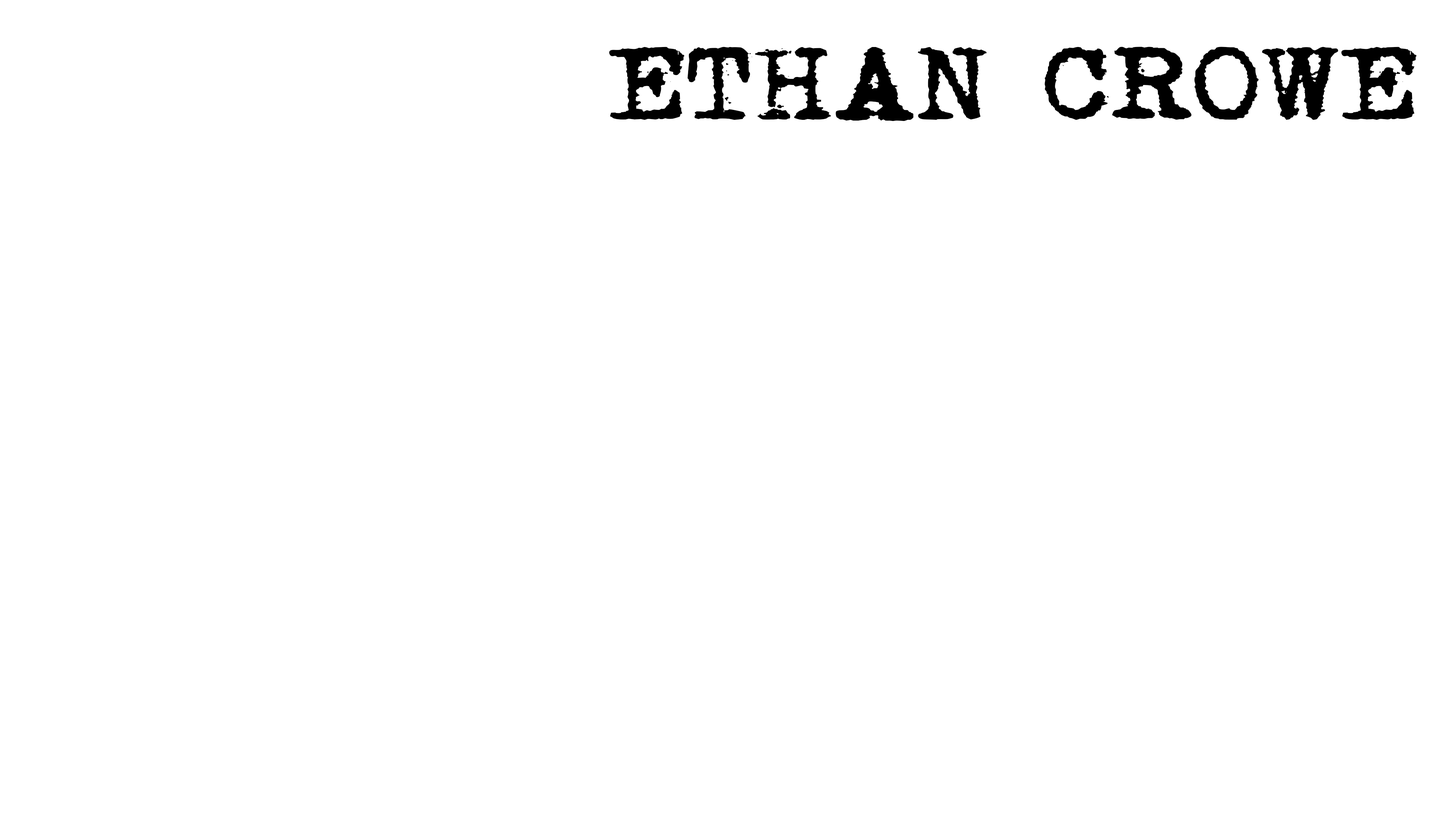
<style>
.page{position:relative;width:1456px;height:819px;background:#ffffff}
.page>*{position:absolute;margin:0}
.t1{font:91.1px "MomsTypewriter";color:#000000;text-transform:uppercase;scale:1.19 1}
</style>
<div class="page">
<p class="t1" style="left:609px;top:47px;width:808px;height:74px">Ethan Crowe</p>
</div>
